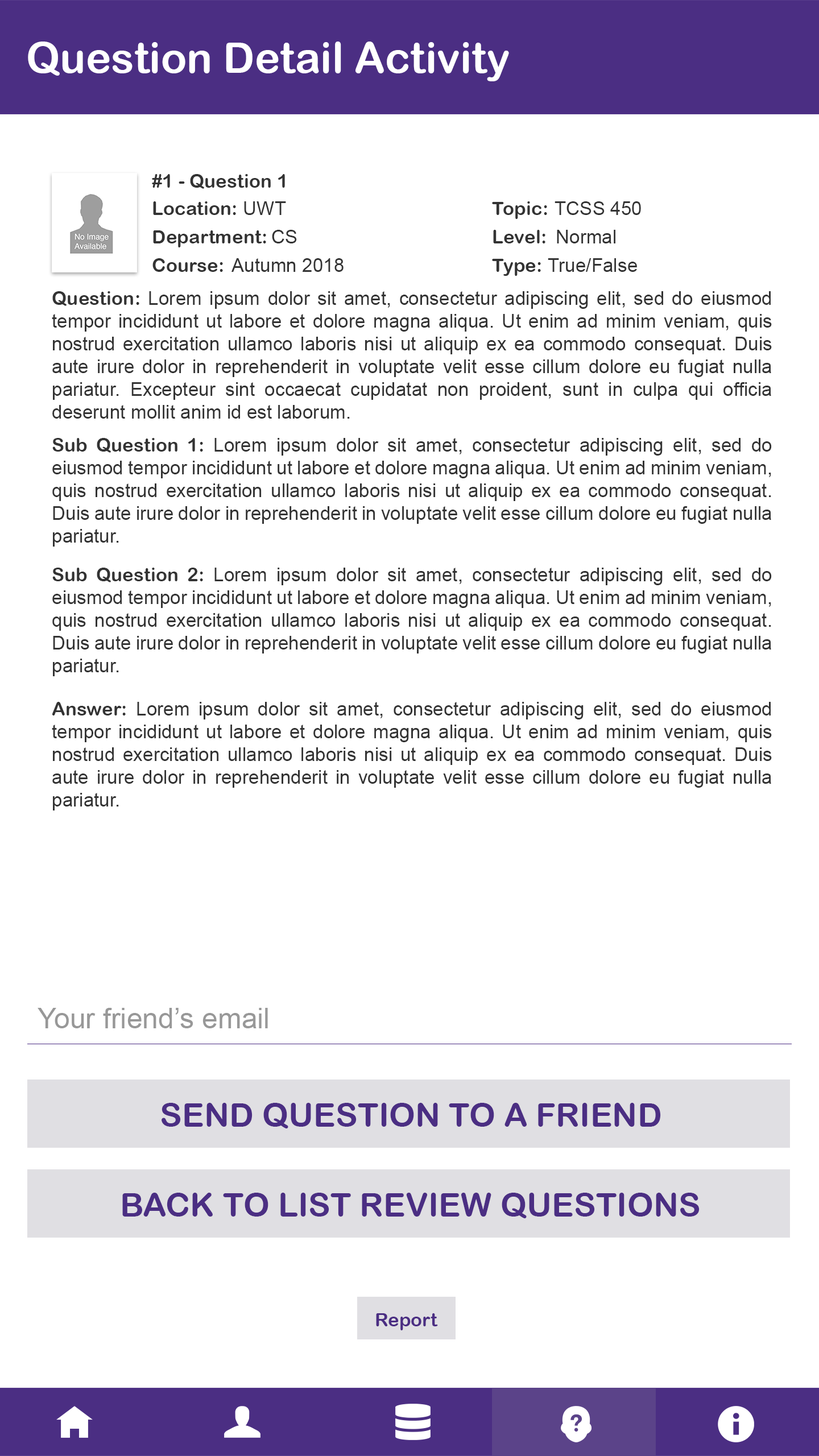
<style>
.page{position:relative;width:819px;height:1456px;background:#ffffff}
.page>*{position:absolute;margin:0}
.t1{font:42.7px "ArialRoundedMTBold";color:#ffffff}
.t2{font:19px "ArialRoundedMTBold";color:#333333}
.t3{font:19px "ArialMT";color:#333333}
.t4{font:28.4px "ArialMT";color:#989898}
.t5{font:33.2px "ArialRoundedMTBold";color:#4b2e83}
.t6{font:19px "ArialRoundedMTBold";color:#4b2e83}
</style>
<div class="page">
<p class="t1" style="left:28px;top:42px;width:481px;height:39px">Question Detail Activity</p>
<p class="t2" style="left:152px;top:174px;width:133px;height:15px">#1 - Question 1</p>
<p class="t2" style="left:153px;top:201px;width:83px;height:14px">Location:</p>
<p class="t3" style="left:244px;top:201px;width:42px;height:14px">UWT</p>
<p class="t2" style="left:492px;top:201px;width:55px;height:18px">Topic:</p>
<p class="t3" style="left:555px;top:201px;width:86px;height:14px">TCSS 450</p>
<p class="t2" style="left:153px;top:230px;width:113px;height:17px">Department:</p>
<p class="t3" style="left:272px;top:230px;width:25px;height:13px">CS</p>
<p class="t2" style="left:493px;top:230px;width:52px;height:13px">Level:</p>
<p class="t3" style="left:557px;top:230px;width:58px;height:13px">Normal</p>
<p class="t2" style="left:152px;top:258px;width:71px;height:14px">Course:</p>
<p class="t3" style="left:231px;top:258px;width:113px;height:14px">Autumn 2018</p>
<p class="t2" style="left:492px;top:259px;width:49px;height:17px">Type:</p>
<p class="t3" style="left:548px;top:258px;width:89px;height:14px">True/False</p>
<p class="t3" style="left:52px;top:291px;width:720px;height:128px;text-align:justify"><span class="t2">Question:</span> Lorem ipsum dolor sit amet, consectetur adipiscing elit, sed do eiusmod tempor incididunt ut labore et dolore magna aliqua. Ut enim ad minim veniam, quis nostrud exercitation ullamco laboris nisi ut aliquip ex ea commodo consequat. Duis aute irure dolor in reprehenderit in voluptate velit esse cillum dolore eu fugiat nulla pariatur. Excepteur sint occaecat cupidatat non proident, sunt in culpa qui officia deserunt mollit anim id est laborum.</p>
<p class="t3" style="left:52px;top:438px;width:720px;height:109px;text-align:justify"><span class="t2">Sub Question 1:</span> Lorem ipsum dolor sit amet, consectetur adipiscing elit, sed do eiusmod tempor incididunt ut labore et dolore magna aliqua. Ut enim ad minim veniam, quis nostrud exercitation ullamco laboris nisi ut aliquip ex ea commodo consequat. Duis aute irure dolor in reprehenderit in voluptate velit esse cillum dolore eu fugiat nulla pariatur.</p>
<p class="t3" style="left:52px;top:568px;width:720px;height:108px;text-align:justify"><span class="t2">Sub Question 2:</span> Lorem ipsum dolor sit amet, consectetur adipiscing elit, sed do eiusmod tempor incididunt ut labore et dolore magna aliqua. Ut enim ad minim veniam, quis nostrud exercitation ullamco laboris nisi ut aliquip ex ea commodo consequat. Duis aute irure dolor in reprehenderit in voluptate velit esse cillum dolore eu fugiat nulla pariatur.</p>
<p class="t3" style="left:52px;top:702px;width:720px;height:108px;text-align:justify"><span class="t2">Answer:</span> Lorem ipsum dolor sit amet, consectetur adipiscing elit, sed do eiusmod tempor incididunt ut labore et dolore magna aliqua. Ut enim ad minim veniam, quis nostrud exercitation ullamco laboris nisi ut aliquip ex ea commodo consequat. Duis aute irure dolor in reprehenderit in voluptate velit esse cillum dolore eu fugiat nulla pariatur.</p>
<p class="t4" style="left:38px;top:1008px;width:230px;height:20px">Your friend’s email</p>
<p class="t5" style="left:162px;top:1103px;width:499px;height:25px">SEND QUESTION TO A FRIEND</p>
<p class="t5" style="left:122px;top:1193px;width:578px;height:25px">BACK TO LIST REVIEW QUESTIONS</p>
<p class="t6" style="left:376px;top:1313px;width:62px;height:17px">Report</p>
</div>
